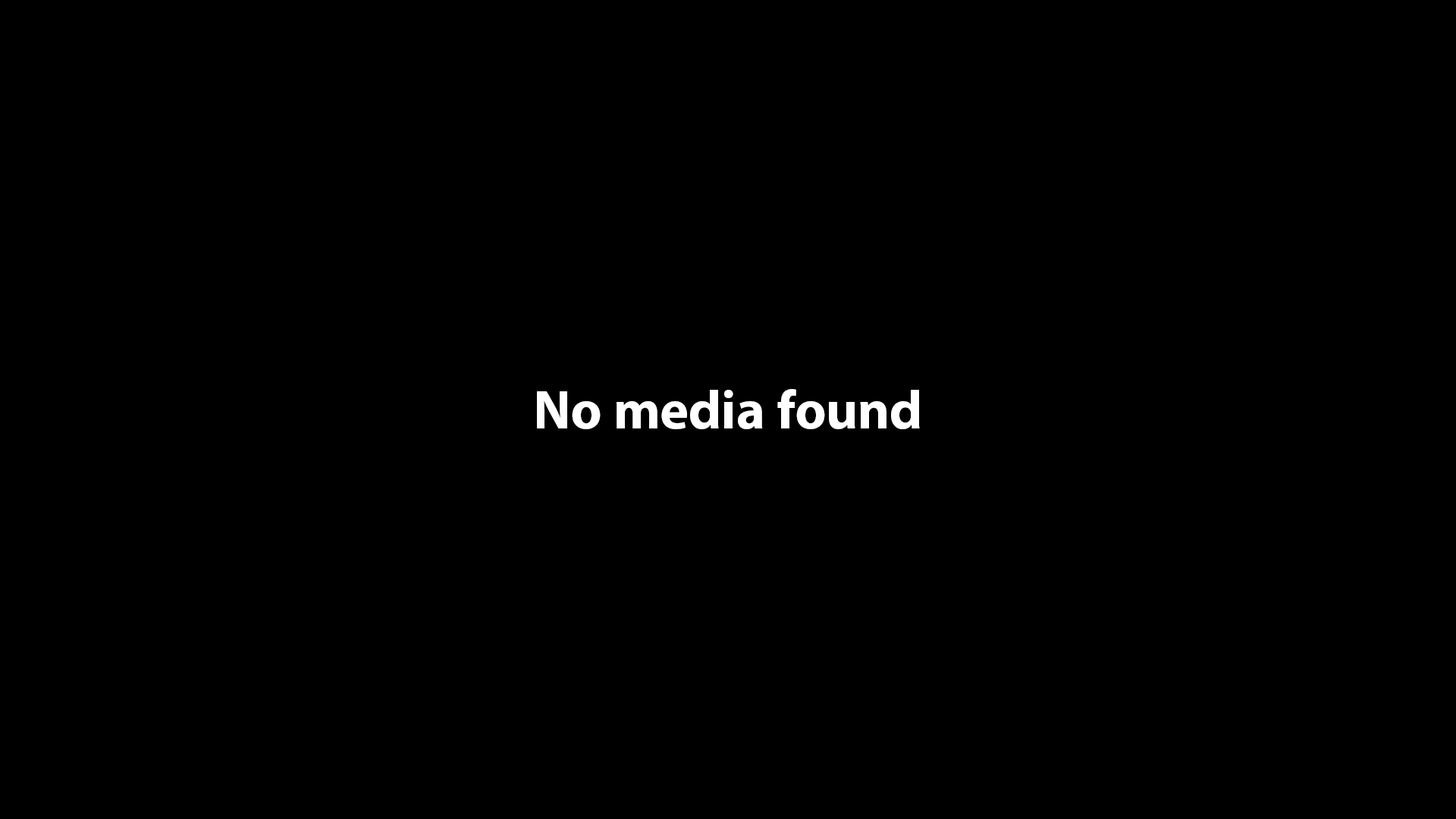
<style>
.page{position:relative;width:1456px;height:819px;background:#000000}
.page>*{position:absolute;margin:0}
.t1{font:54.6px "MyriadPro-Bold";color:#ffffff}
</style>
<div class="page">
<p class="t1" style="left:537px;top:389px;width:383px;height:40px">No media found</p>
</div>
